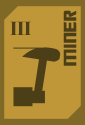
<style>
.page{position:relative;width:85px;height:125px;background:#bf9739}
.page>*{position:absolute;margin:0}
.t1{font:20px "TransformersMovie";letter-spacing:0.04em;color:#4c3f17}
.t2{font:20px "TimesNewRomanPS-BoldMT";letter-spacing:-0.04em;color:#4c3f17}
</style>
<div class="page">
<p class="t1" style="left:63px;top:10px;width:14px;height:56px;rotate:-90deg">miner</p>
<p class="t2" style="left:10px;top:21px;width:21px;height:14px">III</p>
</div>
